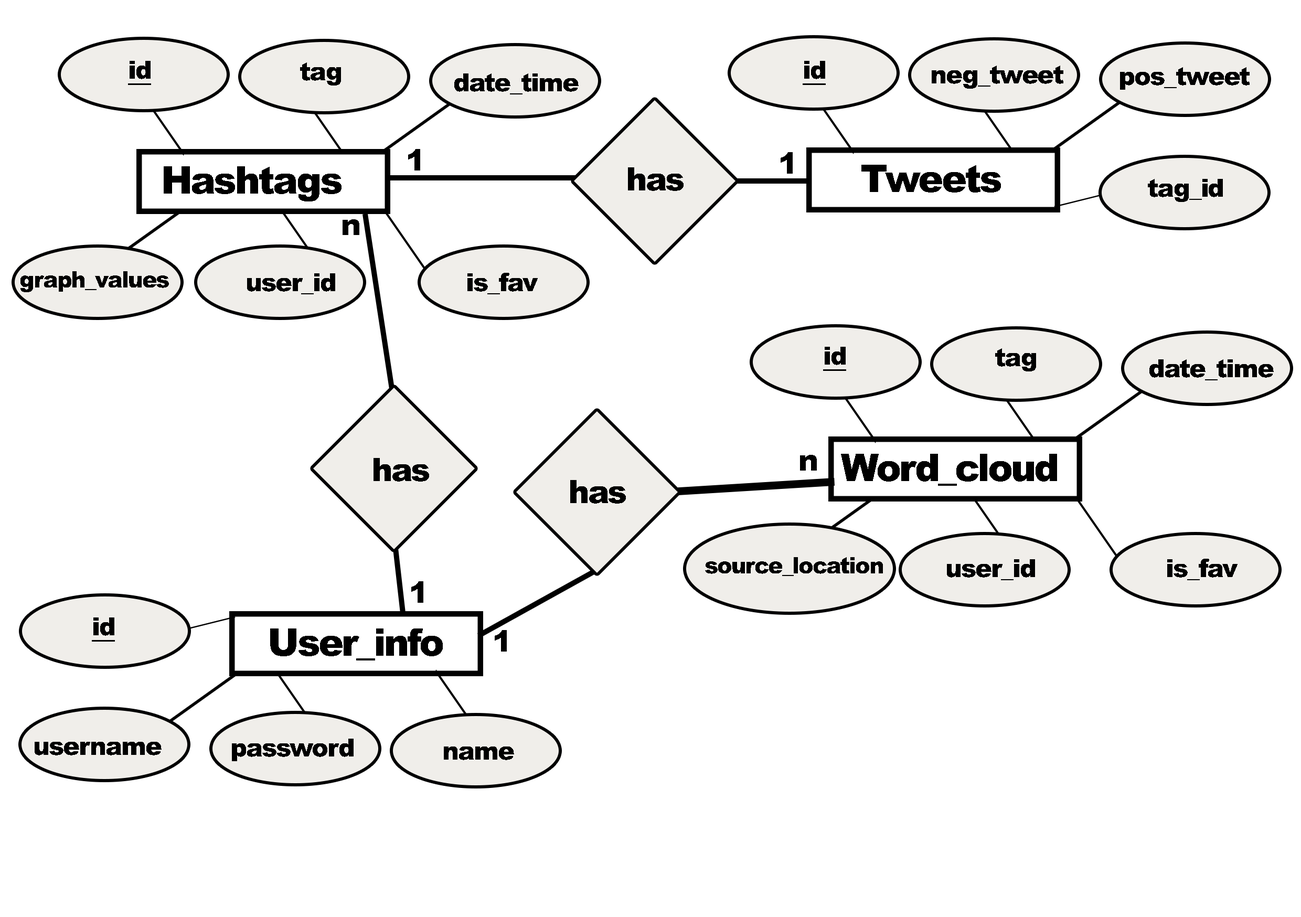
<style>
.page{position:relative;width:1301px;height:917px;background:#ffffff}
.page>*{position:absolute;margin:0}
.t1{font:25.2px "Arial-Black";letter-spacing:-0.05em;color:#000000;text-decoration:underline}
.t2{font:25.2px "Arial-Black";letter-spacing:-0.05em;color:#000000}
.t3{font:29.3px "Arial-Black";letter-spacing:-0.05em;color:#000000}
.t4{font:37.8px "Arial-Black";letter-spacing:-0.05em;color:#000000}
.t5{font:32px "Arial-Black";letter-spacing:-0.05em;color:#000000}
.t6{font:22.5px "Arial-Black";letter-spacing:-0.05em;color:#000000}
</style>
<div class="page">
<p class="t1" style="left:128px;top:61px;width:23px;height:24px">id</p>
<p class="t2" style="left:300px;top:62px;width:41px;height:23px">tag</p>
<p class="t1" style="left:802px;top:61px;width:24px;height:24px">id</p>
<p class="t2" style="left:931px;top:66px;width:132px;height:23px">neg_tweet</p>
<p class="t2" style="left:454px;top:73px;width:124px;height:21px">date_time</p>
<p class="t2" style="left:1120px;top:67px;width:129px;height:23px">pos_tweet</p>
<p class="t3" style="left:408px;top:149px;width:12px;height:21px">1</p>
<p class="t3" style="left:780px;top:152px;width:12px;height:22px">1</p>
<p class="t4" style="left:164px;top:166px;width:177px;height:35px">Hashtags</p>
<p class="t5" style="left:628px;top:167px;width:55px;height:24px">has</p>
<p class="t4" style="left:861px;top:165px;width:140px;height:27px">Tweets</p>
<p class="t2" style="left:1148px;top:179px;width:75px;height:23px">tag_id</p>
<p class="t3" style="left:342px;top:219px;width:17px;height:16px">n</p>
<p class="t6" style="left:20px;top:271px;width:149px;height:21px">graph_values</p>
<p class="t2" style="left:247px;top:273px;width:88px;height:21px">user_id</p>
<p class="t2" style="left:467px;top:273px;width:71px;height:21px">is_fav</p>
<p class="t1" style="left:823px;top:347px;width:23px;height:24px">id</p>
<p class="t2" style="left:995px;top:348px;width:41px;height:23px">tag</p>
<p class="t2" style="left:1149px;top:359px;width:124px;height:21px">date_time</p>
<p class="t5" style="left:373px;top:458px;width:56px;height:23px">has</p>
<p class="t3" style="left:800px;top:455px;width:17px;height:15px">n</p>
<p class="t4" style="left:841px;top:454px;width:216px;height:32px">Word_cloud</p>
<p class="t5" style="left:570px;top:480px;width:56px;height:23px">has</p>
<p class="t6" style="left:705px;top:557px;width:178px;height:19px">source_location</p>
<p class="t2" style="left:947px;top:559px;width:88px;height:21px">user_id</p>
<p class="t2" style="left:1167px;top:559px;width:70px;height:21px">is_fav</p>
<p class="t3" style="left:411px;top:581px;width:12px;height:22px">1</p>
<p class="t1" style="left:92px;top:617px;width:23px;height:24px">id</p>
<p class="t4" style="left:270px;top:628px;width:173px;height:32px">User_info</p>
<p class="t3" style="left:495px;top:630px;width:12px;height:21px">1</p>
<p class="t2" style="left:35px;top:742px;width:127px;height:13px">username</p>
<p class="t2" style="left:232px;top:738px;width:121px;height:23px">password</p>
<p class="t2" style="left:444px;top:746px;width:70px;height:14px">name</p>
</div>
